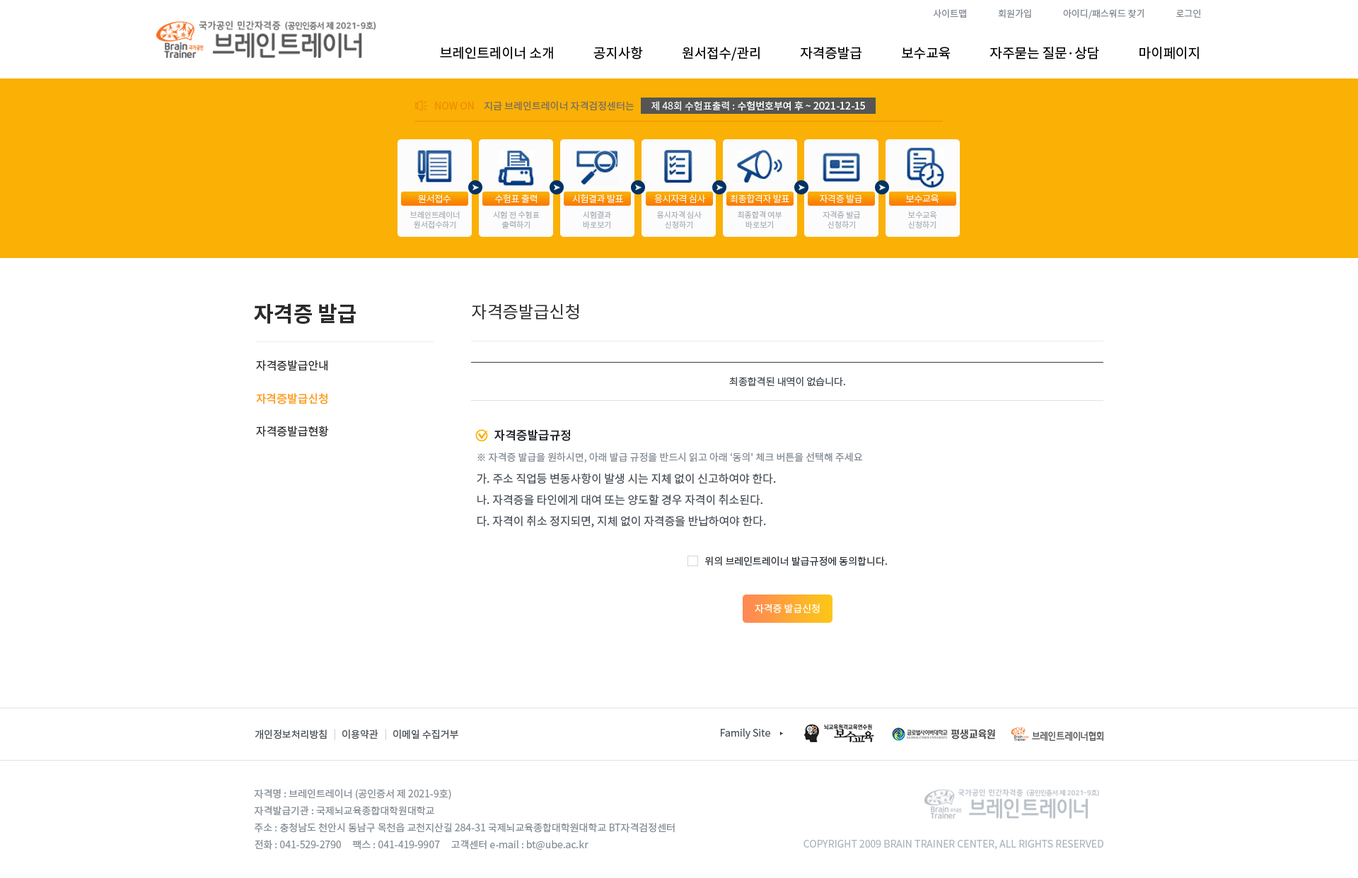
<style>
.page{position:relative;width:1358px;height:878px;background:#ffffff}
.page>*{position:absolute;margin:0}
.t1{font:9.2px "NotoSansCJKkr-Regular";letter-spacing:0.001em;color:#868e96}
.t2{font:13.4px "NotoSansCJKkr-Regular";color:#000000}
.t3{font:9.9px "NotoSansCJKkr-Regular";color:#f08c00}
.t4{font:9.9px "NotoSansCJKkr-Regular";color:#7c6d5d}
.t5{font:9.9px "NotoSansCJKkr-Medium";color:#f8f8f8}
.t6{font:9.9px "NotoSansCJKkr-Regular";color:#f8f8f8}
.t7{font:9.2px "NotoSansCJKkr-Light";letter-spacing:-0.025em;color:#fcfcfc}
.t8{font:7.8px/9.9px "NotoSansCJKkr-Regular";color:#adb5bd}
.t9{font:21.2px "NotoSansCJKkr-Bold";color:#2b2b2b}
.t10{font:17px "NotoSansCJKkr-Regular";color:#2b2b2b}
.t11{font:11.3px "NotoSansCJKkr-Regular";color:#2b2b2b}
.t12{font:9.9px "NotoSansCJKkr-Regular";color:#495057;text-transform:uppercase}
.t13{font:11.3px "NotoSansCJKkr-Medium";color:#fd9f27}
.t14{font:12px "NotoSansCJKkr-Medium";color:#212529}
.t15{font:9.9px "NotoSansCJKkr-Regular";color:#868e96}
.t16{font:11.3px "NotoSansCJKkr-Regular";color:#495057}
.t17{font:9.9px "NotoSansCJKkr-Regular";color:#343a40;text-transform:uppercase}
.t18{font:9.9px "NotoSansCJKkr-Regular";color:#ffffff}
.t19{font:9.9px "NotoSansCJKkr-Regular";color:#495057}
.t20{font:9.9px "NotoSansCJKkr-Regular";color:#ced4da}
.t21{font:9.9px/17px "NotoSansCJKkr-Regular";color:#868e96}
.t22{font:9.9px "NotoSansCJKkr-Regular";color:#adb5bd}
</style>
<div class="page">
<p class="t1" style="left:933px;top:8px;width:268px;height:11px">사이트맵               회원가입               아이디/패스워드 찾기               로그인</p>
<p class="t2" style="left:440px;top:46px;width:759px;height:15px">브레인트레이너 소개             공지사항             원서접수/관리             자격증발급             보수교육             자주묻는 질문·상담             마이페이지</p>
<p class="t3" style="left:435px;top:102px;width:39px;height:8px">NOW ON</p>
<p class="t4" style="left:484px;top:101px;width:150px;height:10px">지금 브레인트레이너 자격검정센터는</p>
<p class="t5" style="left:651px;top:101px;width:214px;height:10px"><span class="t6">제 48회 수험표출력 : </span>수험번호부여 후 ~ 2021-12-15</p>
<p class="t7" style="left:418px;top:194px;width:33px;height:10px">원서접수</p>
<p class="t7" style="left:495px;top:194px;width:42px;height:10px">수험표 출력</p>
<p class="t7" style="left:572px;top:194px;width:51px;height:9px">시험결과 발표</p>
<p class="t7" style="left:654px;top:194px;width:52px;height:10px">응시자격 심사</p>
<p class="t7" style="left:730px;top:194px;width:59px;height:10px">최종합격자 발표</p>
<p class="t7" style="left:820px;top:194px;width:42px;height:10px">자격증 발급</p>
<p class="t7" style="left:905px;top:194px;width:33px;height:10px">보수교육</p>
<p class="t8" style="left:410px;top:211px;width:50px;height:18px;text-align:center">브레인트레이너<br>원서접수하기</p>
<p class="t8" style="left:493px;top:211px;width:47px;height:18px;text-align:center">시험 전 수험표<br>출력하기</p>
<p class="t8" style="left:583px;top:211px;width:28px;height:18px;text-align:center">시험결과<br>바로보기</p>
<p class="t8" style="left:657px;top:211px;width:44px;height:18px;text-align:center">응시자격 심사<br>신청하기</p>
<p class="t8" style="left:738px;top:211px;width:44px;height:18px;text-align:center">최종합격 여부<br>바로보기</p>
<p class="t8" style="left:822px;top:211px;width:39px;height:18px;text-align:center">자격증 발급<br>신청하기</p>
<p class="t8" style="left:908px;top:211px;width:29px;height:18px;text-align:center">보수교육<br>신청하기</p>
<p class="t9" style="left:254px;top:303px;width:102px;height:21px">자격증 발급</p>
<p class="t10" style="left:472px;top:304px;width:106px;height:16px">자격증발급신청</p>
<p class="t11" style="left:256px;top:360px;width:71px;height:11px">자격증발급안내</p>
<p class="t12" style="left:729px;top:377px;width:116px;height:10px">최종합격된 내역이 없습니다.</p>
<p class="t13" style="left:256px;top:393px;width:71px;height:11px">자격증발급신청</p>
<p class="t11" style="left:256px;top:426px;width:73px;height:11px">자격증발급현황</p>
<p class="t14" style="left:494px;top:429px;width:76px;height:12px">자격증발급규정</p>
<p class="t15" style="left:477px;top:453px;width:386px;height:10px">※ 자격증 발급을 원하시면, 아래 발급 규정을 반드시 읽고 아래 ‘동의' 체크 버튼을 선택해 주세요</p>
<p class="t16" style="left:477px;top:473px;width:299px;height:11px">가. 주소 직업등 변동사항이 발생 시는 지체 없이 신고하여야 한다.</p>
<p class="t16" style="left:477px;top:494px;width:285px;height:12px">나. 자격증을 타인에게 대여 또는 양도할 경우 자격이 취소된다.</p>
<p class="t16" style="left:477px;top:516px;width:289px;height:12px">다. 자격이 취소 정지되면, 지체 없이 자격증을 반납하여야 한다.</p>
<p class="t17" style="left:705px;top:557px;width:182px;height:9px">위의 브레인트레이너 발급규정에 동의합니다.</p>
<p class="t18" style="left:755px;top:604px;width:65px;height:10px">자격증 발급신청</p>
<p class="t19" style="left:255px;top:730px;width:72px;height:10px">개인정보처리방침</p>
<p class="t20" style="left:334px;top:729px;width:1px;height:11px">|</p>
<p class="t19" style="left:342px;top:730px;width:36px;height:10px">이용약관</p>
<p class="t20" style="left:385px;top:729px;width:1px;height:11px">|</p>
<p class="t19" style="left:393px;top:730px;width:65px;height:10px">이메일 수집거부</p>
<p class="t19" style="left:721px;top:728px;width:49px;height:11px">Family Site</p>
<p class="t21" style="left:254px;top:789px;width:421px;height:62px">자격명 : 브레인트레이너 (공인증서 제 2021-9호)<br>자격발급기관 : 국제뇌교육종합대학원대학교<br>주소 : 충청남도 천안시 동남구 목천읍 교천지산길 284-31 국제뇌교육종합대학원대학교 BT자격검정센터<br>전화 : 041-529-2790     팩스 : 041-419-9907     고객센터 e-mail : bt@ube.ac.kr</p>
<p class="t22" style="left:803px;top:840px;width:300px;height:10px">COPYRIGHT 2009 BRAIN TRAINER CENTER, ALL RIGHTS RESERVED</p>
</div>
